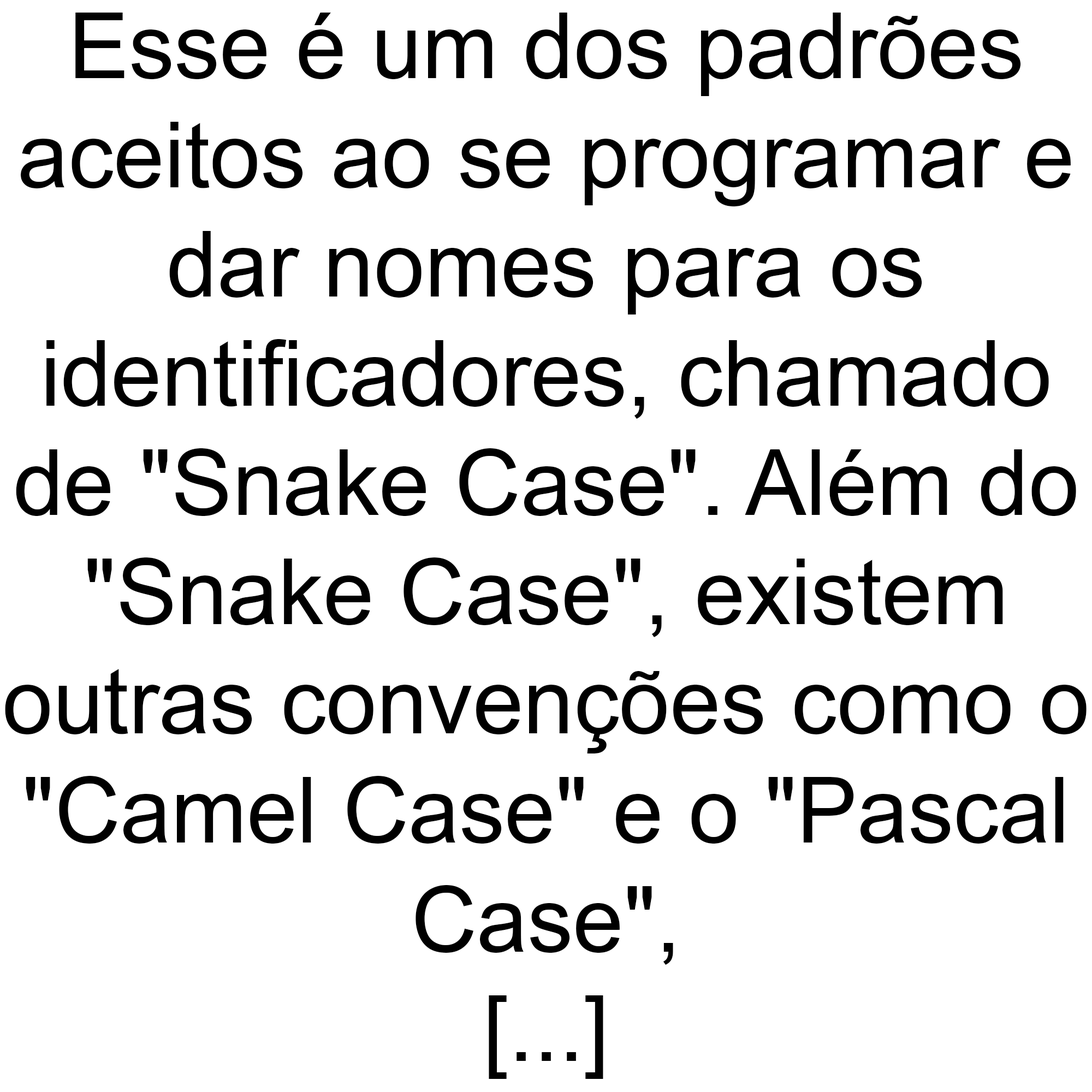
<style>
.page{position:relative;width:1092px;height:1092px;background:#ffffff}
.page>*{position:absolute;margin:0}
.t1{font:91px "ArialMT";color:#000000}
</style>
<div class="page">
<p class="t1" style="left:5px;top:13px;width:1082px;height:1066px;text-align:center">Esse é um dos padrões<br>aceitos ao se programar e<br>dar nomes para os<br>identificadores, chamado<br>de "Snake Case". Além do<br>"Snake Case", existem<br>outras convenções como o<br>"Camel Case" e o "Pascal<br>Case",<br>[...]</p>
</div>
